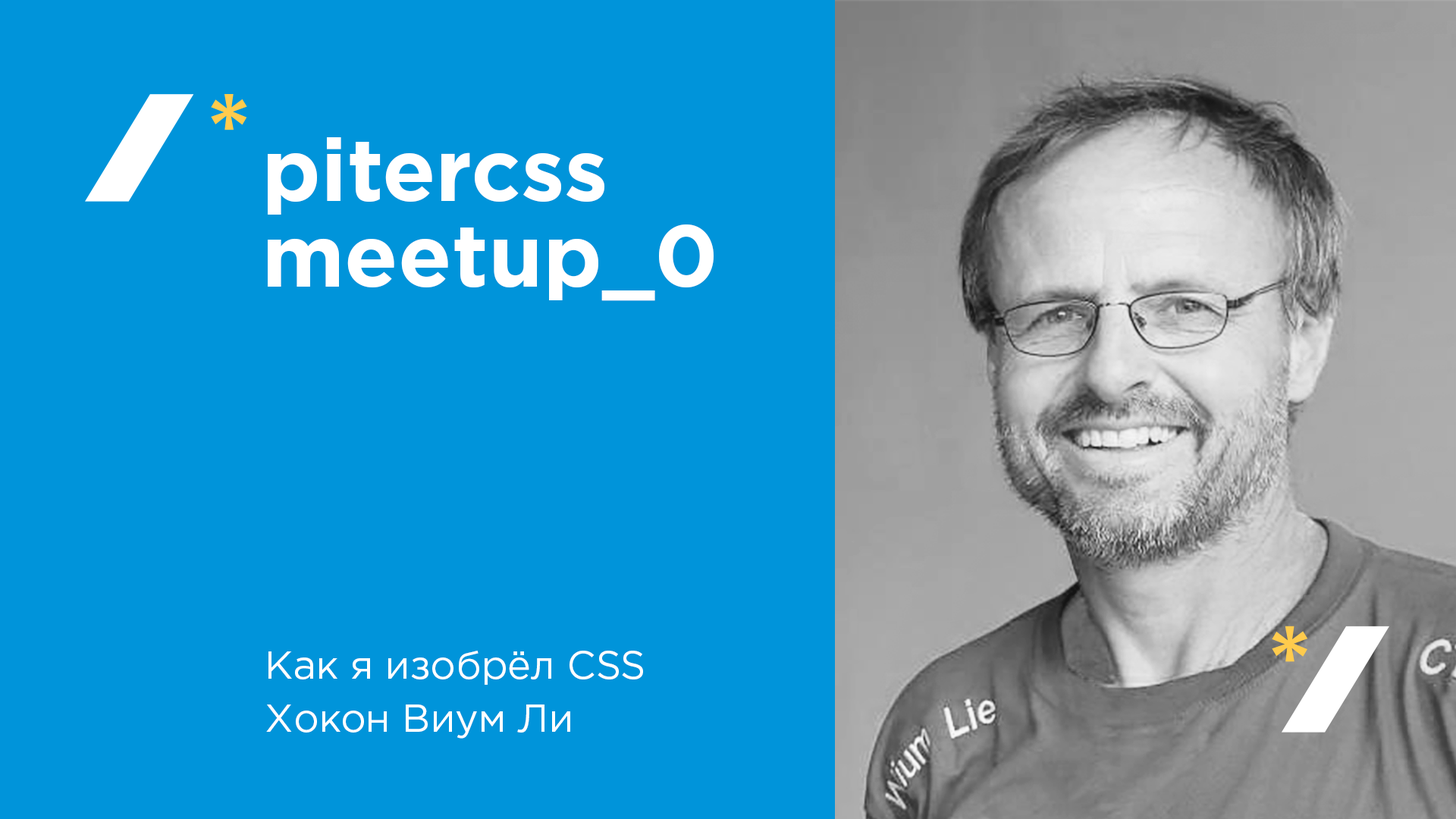
<style>
.page{position:relative;width:1456px;height:819px;background:#0094da}
.page>*{position:absolute;margin:0}
.t1{font:87.4px/85.5px "GothamPro-Bold";color:#ffffff}
.t2{font:39.4px/53.1px "GothamPro";color:#ffffff}
</style>
<div class="page">
<p class="t1" style="left:268px;top:137px;width:446px;height:164px">pitercss<br>meetup_0</p>
<p class="t2" style="left:266px;top:651px;width:377px;height:88px">Как я изобрёл CSS<br>Хокон Виум Ли</p>
</div>
